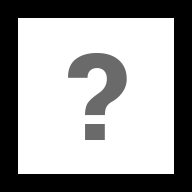
<style>
.page{position:relative;width:192px;height:192px;background:#ffffff}
.page>*{position:absolute;margin:0}
.t1{font:120px "Roboto-Black";color:#6a6a6a}
</style>
<div class="page">
<p class="t1" style="left:68px;top:53px;width:59px;height:87px">?</p>
</div>
